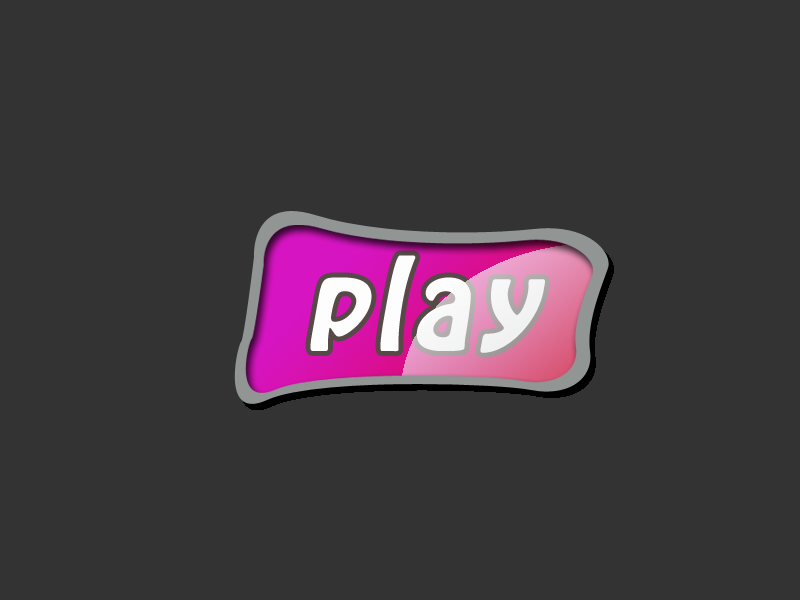
<style>
.page{position:relative;width:800px;height:600px;background:#333333}
.page>*{position:absolute;margin:0}
.t1{font:111.5px "HoboStd";letter-spacing:0.05em;color:#fdfdfd;font-weight:bold;font-style:italic}
</style>
<div class="page">
<p class="t1" style="left:310px;top:255px;width:235px;height:98px">play</p>
</div>
